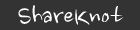
<style>
.page{position:relative;width:140px;height:30px;background:#333333}
.page>*{position:absolute;margin:0}
.t1{font:30px "NanumBrush";color:#ffffff}
</style>
<div class="page">
<p class="t1" style="left:18px;top:5px;width:105px;height:20px">ShareKnot</p>
</div>
